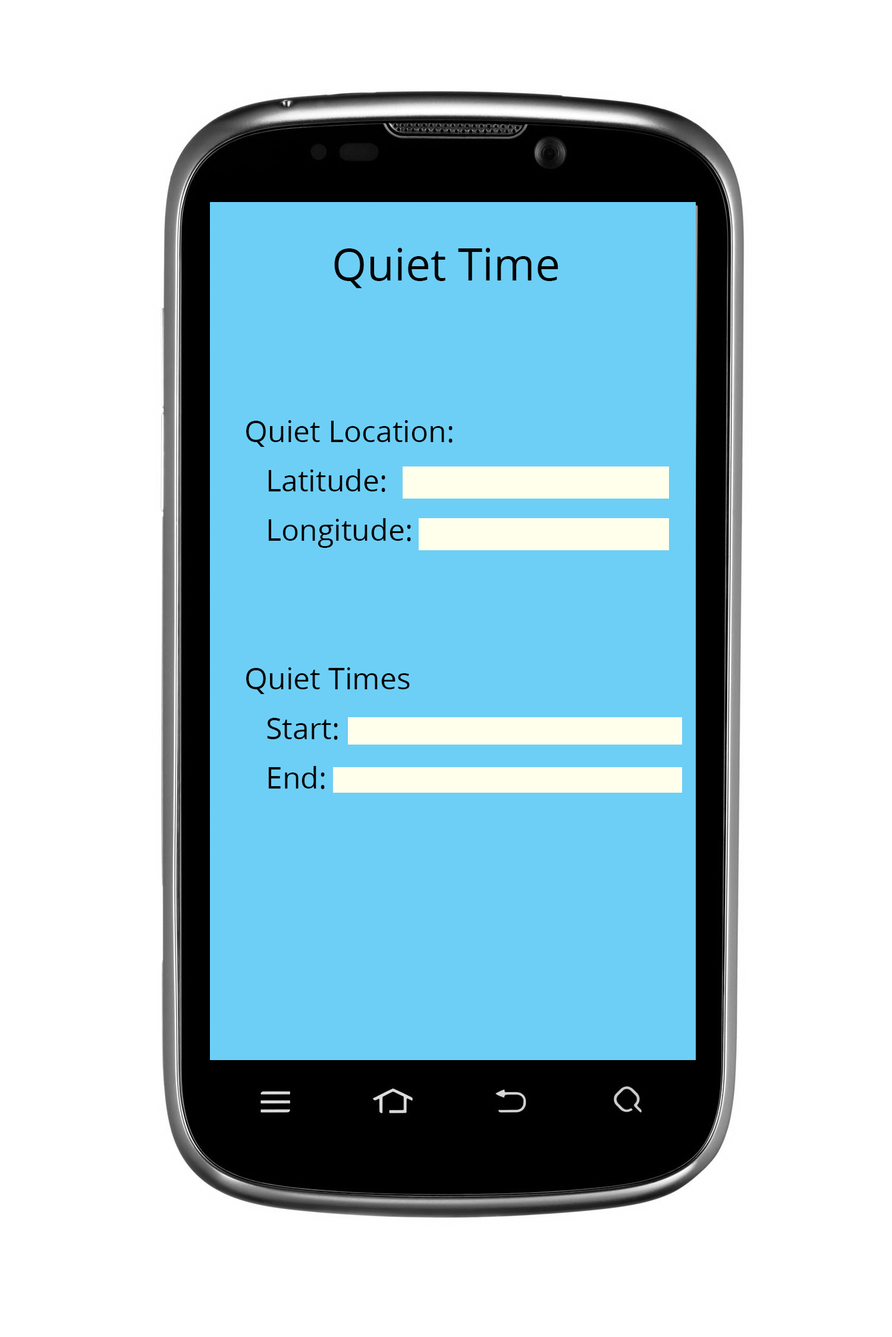
<style>
.page{position:relative;width:892px;height:1337px;background:#ffffff}
.page>*{position:absolute;margin:0}
.t1{font:44.6px "OpenSans";color:#040404}
.t2{font:7.1px/49.5px "OpenSans";color:#040404}
</style>
<div class="page">
<p class="t1" style="left:334px;top:248px;width:224px;height:40px">Quiet Time</p>
<p class="t2" style="left:246px;top:420px;width:206px;height:369px">Quiet Location:<br> Latitude: <br> Longitude:<br><br><br>Quiet Times<br> Start: <br> End:</p>
</div>
